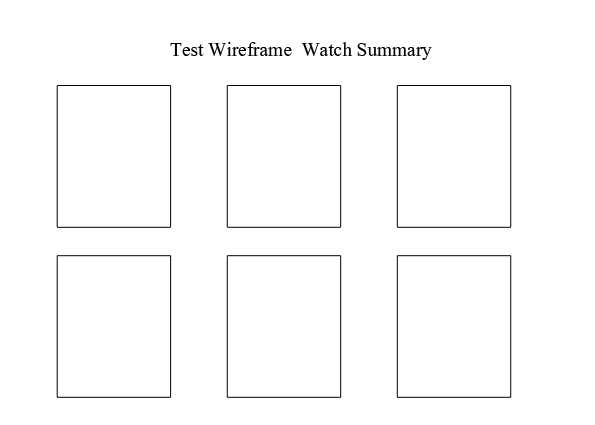
<style>
.page{position:relative;width:595px;height:425px;background:#ffffff}
.page>*{position:absolute;margin:0}
.t1{font:24px "Aparajita";color:#000000}
</style>
<div class="page">
<p class="t1" style="left:170px;top:42px;width:262px;height:18px">Test Wireframe  Watch Summary</p>
</div>
